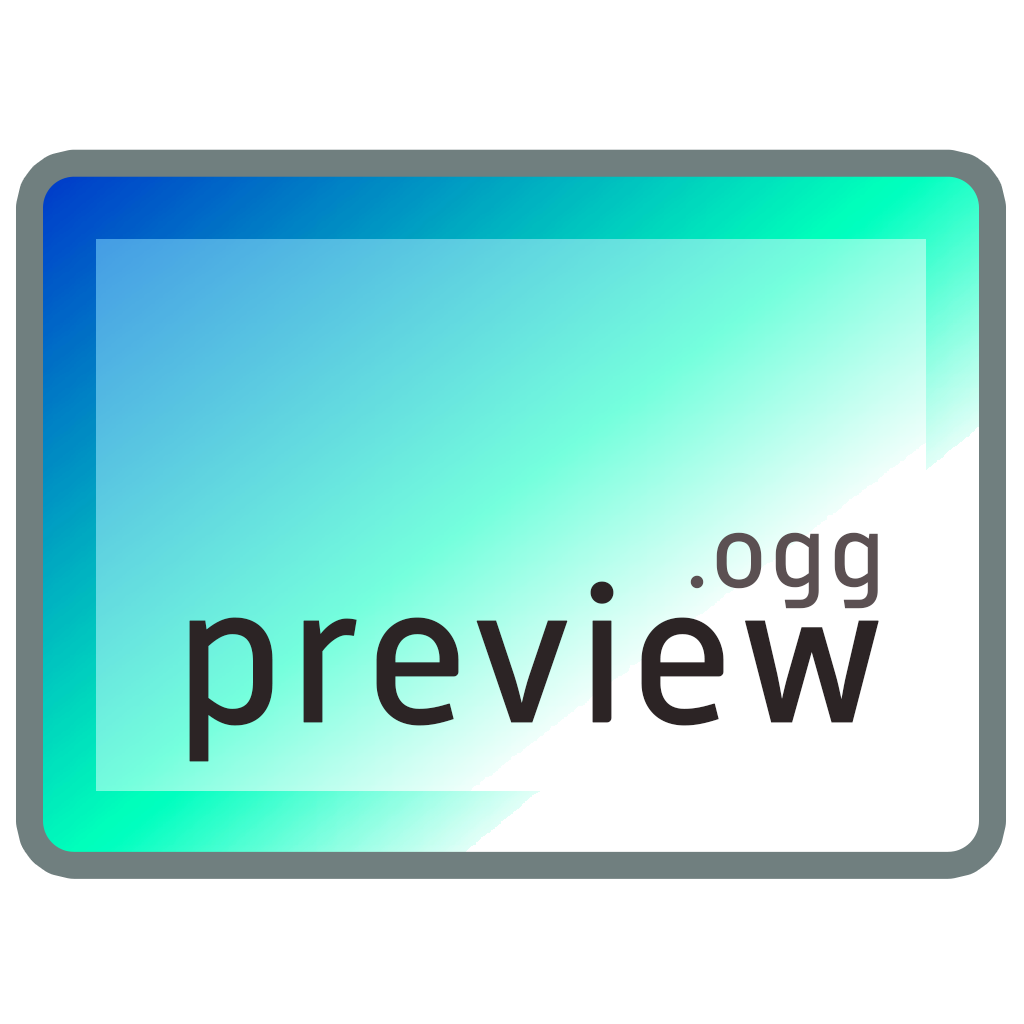
<style>
.page{position:relative;width:1024px;height:1024px;background:#ffffff}
.page>*{position:absolute;margin:0}
.t1{font:196px/135.1px "AlwynNew-Regular";color:#2c2425;font-weight:bold}
.t2{font:102.5px/135.1px "AlwynNew-Regular";color:#5b5052;font-weight:bold}
</style>
<div class="page">
<p class="t1" style="left:189px;top:532px;width:690px;height:230px;text-align:right"><span class="t2">.ogg<br></span>preview</p>
</div>
